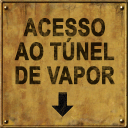
<style>
.page{position:relative;width:128px;height:128px}
.page>*{position:absolute;margin:0}
.t1{font:24px/24px "Arial-BoldMT";color:#2c1f08;text-transform:uppercase;font-weight:bold;scale:0.78 1}
</style>
<div class="page">
<p class="t1" style="left:14px;top:18px;width:101px;height:67px;text-align:center">acesso<br>ao túnel<br>de vapor</p>
</div>
